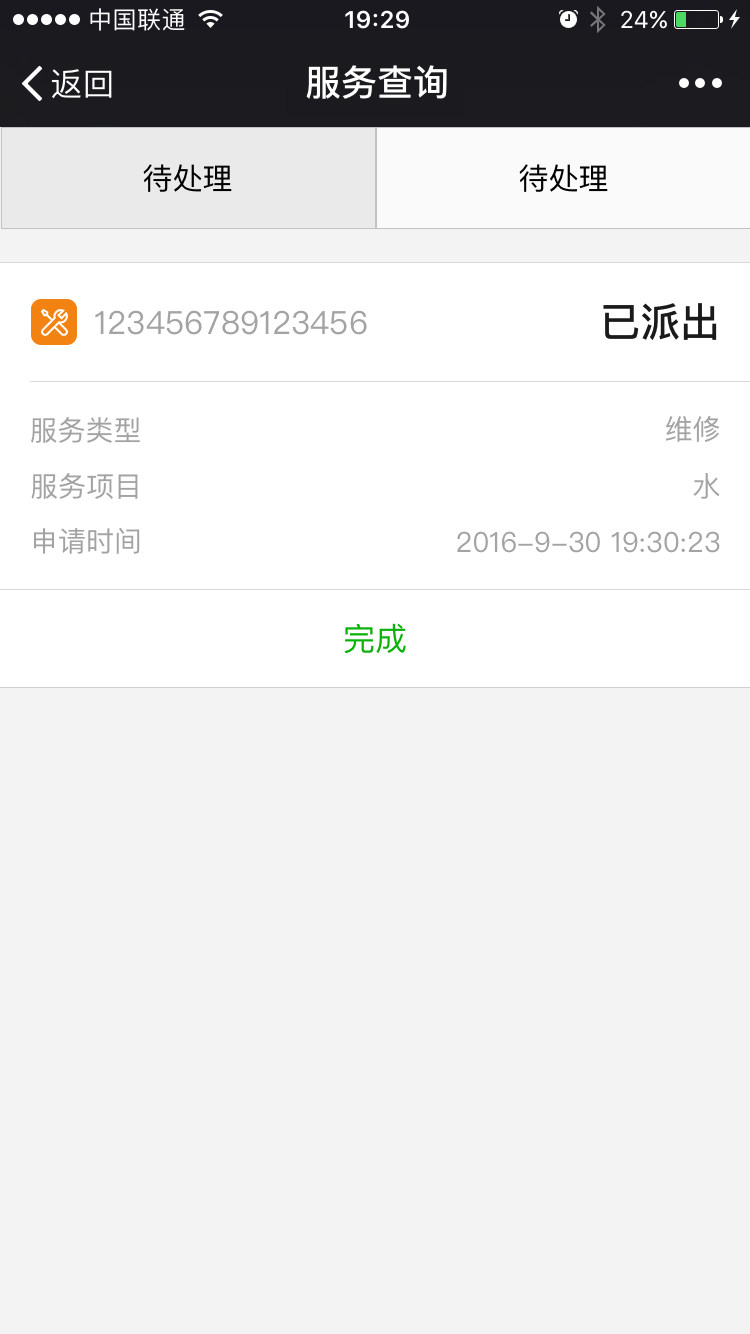
<style>
.page{position:relative;width:750px;height:1334px;background:#f3f3f3}
.page>*{position:absolute;margin:0}
.t1{font:36px "PingFangSC-Medium";color:#ffffff}
.t2{font:30px "PingFangSC-Regular";color:#000000}
.t3{font:40px "PingFangSC-Medium";color:#1a1a1a}
.t4{font:32px "PingFangSC-Regular";color:#a3a3a3}
.t5{font:28px "PingFangSC-Regular";color:#a3a3a3}
.t6{font:32px "PingFangSC-Regular";color:#0bb20c}
</style>
<div class="page">
<p class="t1" style="left:306px;top:65px;width:141px;height:34px">服务查询</p>
<p class="t2" style="left:143px;top:164px;width:89px;height:28px">待处理</p>
<p class="t2" style="left:519px;top:164px;width:89px;height:28px">待处理</p>
<p class="t3" style="left:603px;top:303px;width:114px;height:37px">已派出</p>
<p class="t4" style="left:95px;top:310px;width:272px;height:25px">123456789123456</p>
<p class="t5" style="left:31px;top:417px;width:109px;height:26px">服务类型</p>
<p class="t5" style="left:665px;top:416px;width:55px;height:26px">维修</p>
<p class="t5" style="left:31px;top:473px;width:107px;height:26px">服务项目</p>
<p class="t5" style="left:693px;top:473px;width:27px;height:26px">水</p>
<p class="t5" style="left:34px;top:528px;width:106px;height:26px">申请时间</p>
<p class="t5" style="left:457px;top:531px;width:263px;height:22px">2016-9-30 19:30:23</p>
<p class="t6" style="left:344px;top:623px;width:62px;height:31px">完成</p>
</div>
